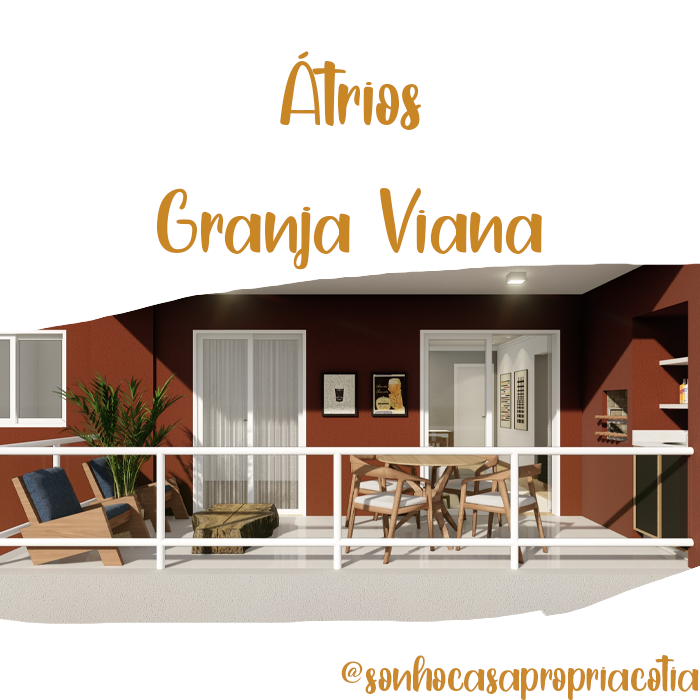
<style>
.page{position:relative;width:700px;height:700px;background:#ffffff}
.page>*{position:absolute;margin:0}
.t1{font:107px "YellowRabbit-PersonalUse";color:#c88624}
.t2{font:60px "YellowRabbit-PersonalUse";color:#c88624}
</style>
<div class="page">
<p class="t1" style="left:156px;top:51px;width:386px;height:219px;text-align:center">Átrios<br>Granja Viana</p>
<p class="t2" style="left:341px;top:655px;width:358px;height:45px">@sonhocasapropriacotia</p>
</div>
